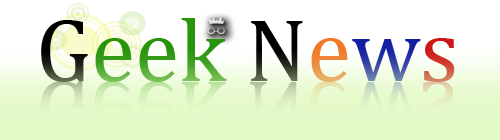
<style>
.page{position:relative;width:500px;height:140px;background:#ffffff}
.page>*{position:absolute;margin:0}
.t1{font:90px "Cambria";color:#28940c}
.t2{font:90px "Cambria";color:#000000}
.t3{font:90px "Cambria";color:#f07828}
.t4{font:90px "Cambria";color:#1320a3}
.t5{font:90px "Cambria";color:#cd1616}
</style>
<div class="page">
<p class="t1" style="left:41px;top:18px;width:414px;height:64px"><span class="t2">G</span>eek<span class="t2"> N</span><span class="t3">e</span><span class="t4">w</span><span class="t5">s</span></p>
</div>
